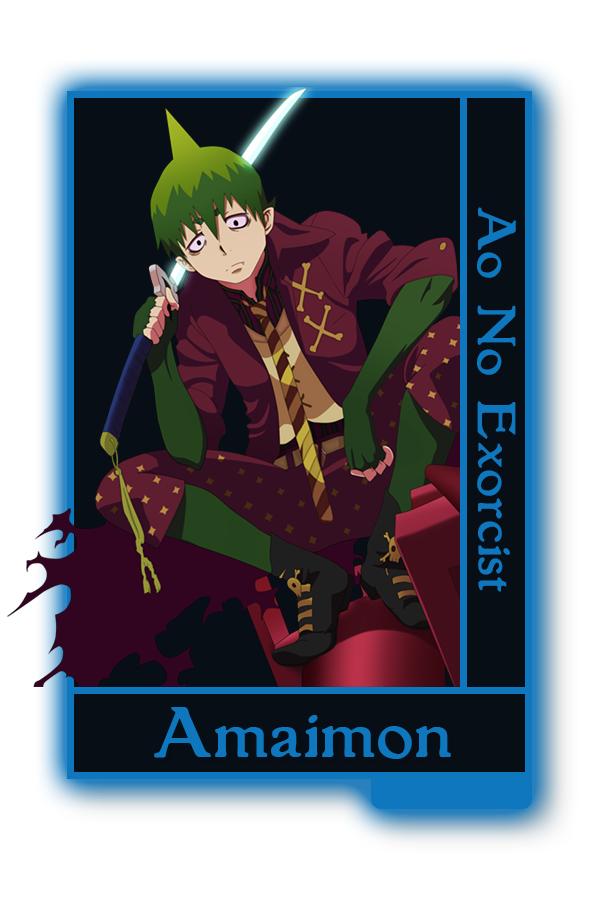
<style>
.page{position:relative;width:600px;height:900px;background:#070e16}
.page>*{position:absolute;margin:0}
.t1{font:48.8px "Grantham-Roman";color:#0f77be}
.t2{font:65.2px "Grantham-Roman";color:#0f77be}
</style>
<div class="page">
<p class="t1" style="left:477px;top:207px;width:39px;height:385px;rotate:90deg">Ao No Exorcist</p>
<p class="t2" style="left:154px;top:707px;width:297px;height:52px">Amaimon</p>
</div>
